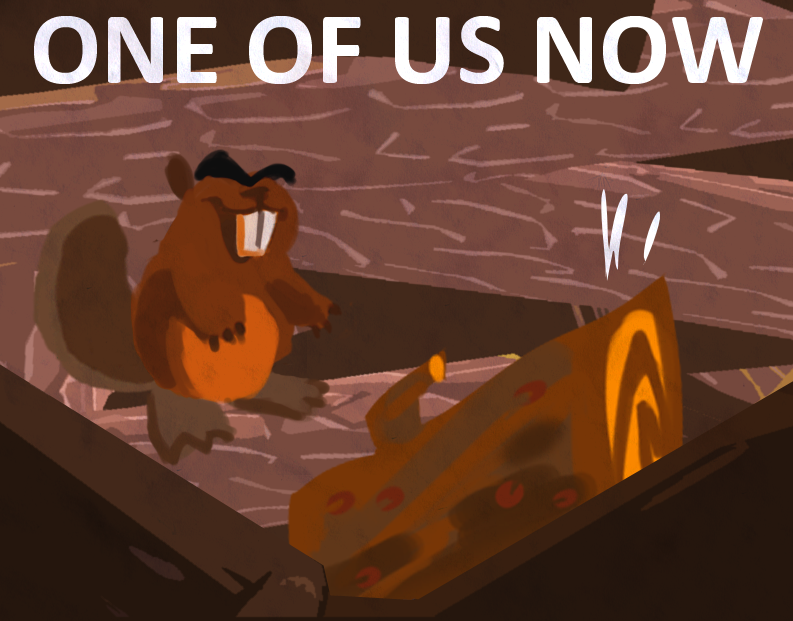
<style>
.page{position:relative;width:793px;height:621px}
.page>*{position:absolute;margin:0}
.t1{font:105px "Calibri-Bold";color:#ffffff}
</style>
<div class="page">
<p class="t1" style="left:34px;top:16px;width:729px;height:68px">ONE OF US NOW</p>
</div>
